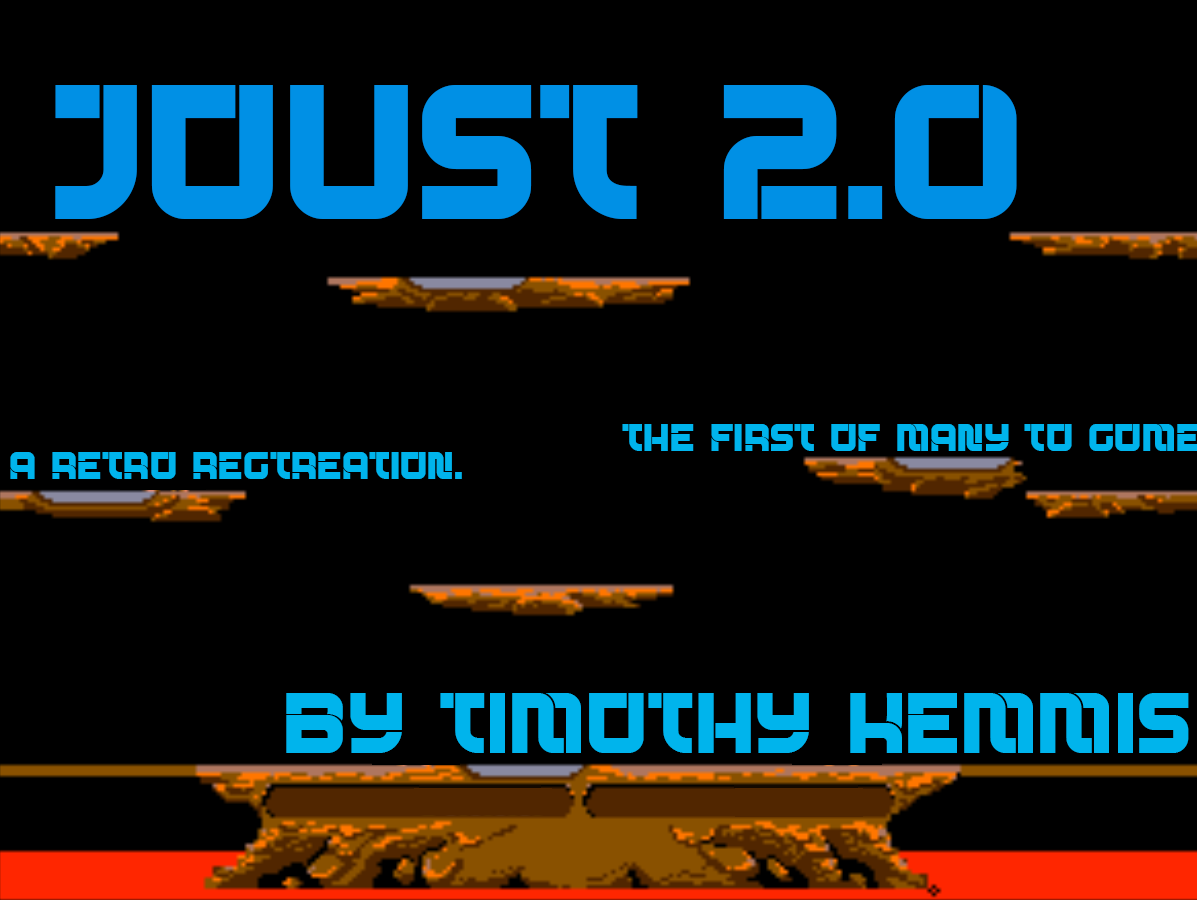
<style>
.page{position:relative;width:1197px;height:900px;background:#000000}
.page>*{position:absolute;margin:0}
.t1{font:200px "Advantage-Regular";color:#0090e5}
.t2{font:40px "Advantage-Regular";color:#00b4ec}
.t3{font:90px "Advantage-Regular";color:#00b4ec}
</style>
<div class="page">
<p class="t1" style="left:55px;top:85px;width:962px;height:134px">Joust 2.0</p>
<p class="t2" style="left:10px;top:452px;width:452px;height:27px">A retro rectreation.</p>
<p class="t3" style="left:286px;top:693px;width:903px;height:60px">By Timothy Kemmis</p>
</div>
